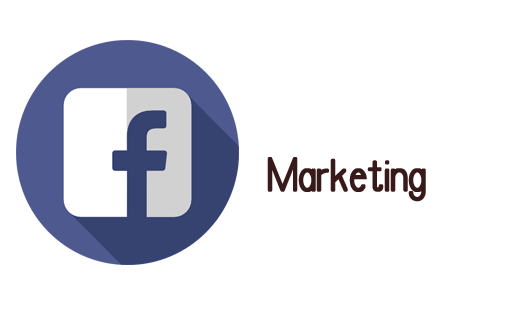
<style>
.page{position:relative;width:517px;height:326px;background:#ffffff}
.page>*{position:absolute;margin:0}
.t1{font:46.6px "FCBasicFont";color:#391a1a;font-weight:bold;scale:0.92 1}
</style>
<div class="page">
<p class="t1" style="left:267px;top:157px;width:159px;height:45px">Marketing</p>
</div>
